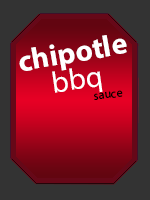
<style>
.page{position:relative;width:150px;height:200px;background:#333333}
.page>*{position:absolute;margin:0}
.t1{font:30px "MyriadPro-Bold";color:#ffffff}
.t2{font:30px "MyriadPro-Regular";color:#ffffff}
.t3{font:12px "MyriadPro-Regular";color:#000000}
</style>
<div class="page">
<p class="t1" style="left:19px;top:35px;width:108px;height:36px;rotate:-10deg">chipotle</p>
<p class="t2" style="left:52px;top:68px;width:51px;height:25px;rotate:-8deg">bbq</p>
<p class="t3" style="left:94px;top:90px;width:29px;height:10px;rotate:-7deg">sauce</p>
</div>
